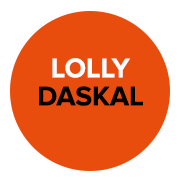
<style>
.page{position:relative;width:180px;height:180px;background:#e84d0e}
.page>*{position:absolute;margin:0}
.t1{font:28px "ProximaNova-Bold";color:#ffffff;text-transform:uppercase}
.t2{font:28px "ProximaNova-Bold";color:#000000;text-transform:uppercase}
</style>
<div class="page">
<p class="t1" style="left:52px;top:58px;width:78px;height:20px">Lolly</p>
<p class="t2" style="left:39px;top:86px;width:104px;height:20px">Daskal</p>
</div>
